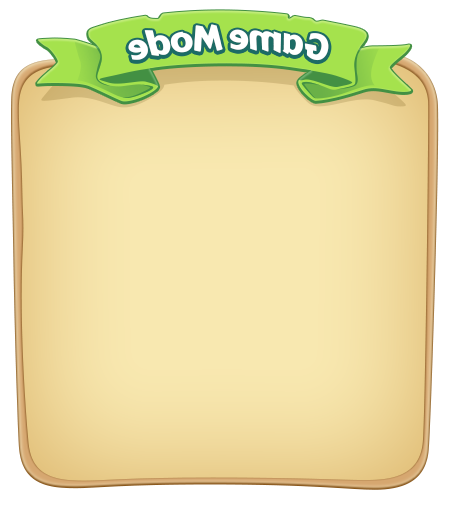
<style>
.page{position:relative;width:450px;height:505px}
.page>*{position:absolute;margin:0}
.t1{font:34.9px "CarterOne";letter-spacing:-0.02em;color:#ffffff}
</style>
<div class="page">
<p class="t1" style="left:128px;top:24px;width:201px;height:37px;rotate:-180deg">Game Mode</p>
</div>
